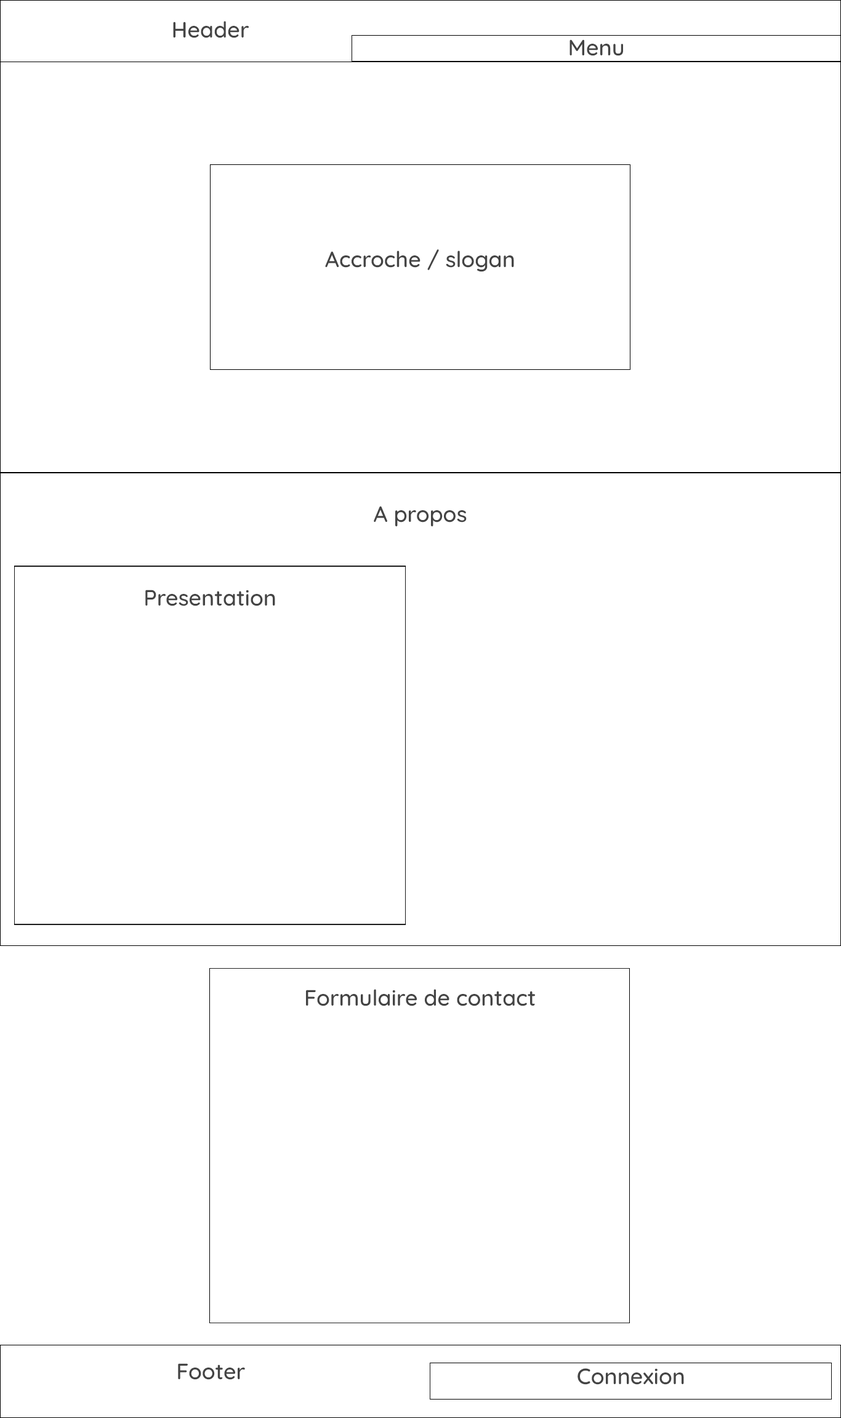
<style>
.page{position:relative;width:841px;height:1418px;background:#ffffff}
.page>*{position:absolute;margin:0}
.t1{font:22.2px "Quicksand-Medium";color:#444444}
</style>
<div class="page">
<p class="t1" style="left:173px;top:21px;width:76px;height:17px">Header</p>
<p class="t1" style="left:569px;top:39px;width:54px;height:17px">Menu</p>
<p class="t1" style="left:325px;top:249px;width:189px;height:23px">Accroche / slogan</p>
<p class="t1" style="left:374px;top:506px;width:93px;height:21px">A propos</p>
<p class="t1" style="left:145px;top:590px;width:130px;height:16px">Presentation</p>
<p class="t1" style="left:306px;top:989px;width:229px;height:17px">Formulaire de contact</p>
<p class="t1" style="left:178px;top:1363px;width:67px;height:17px">Footer</p>
<p class="t1" style="left:577px;top:1368px;width:107px;height:17px">Connexion</p>
</div>
